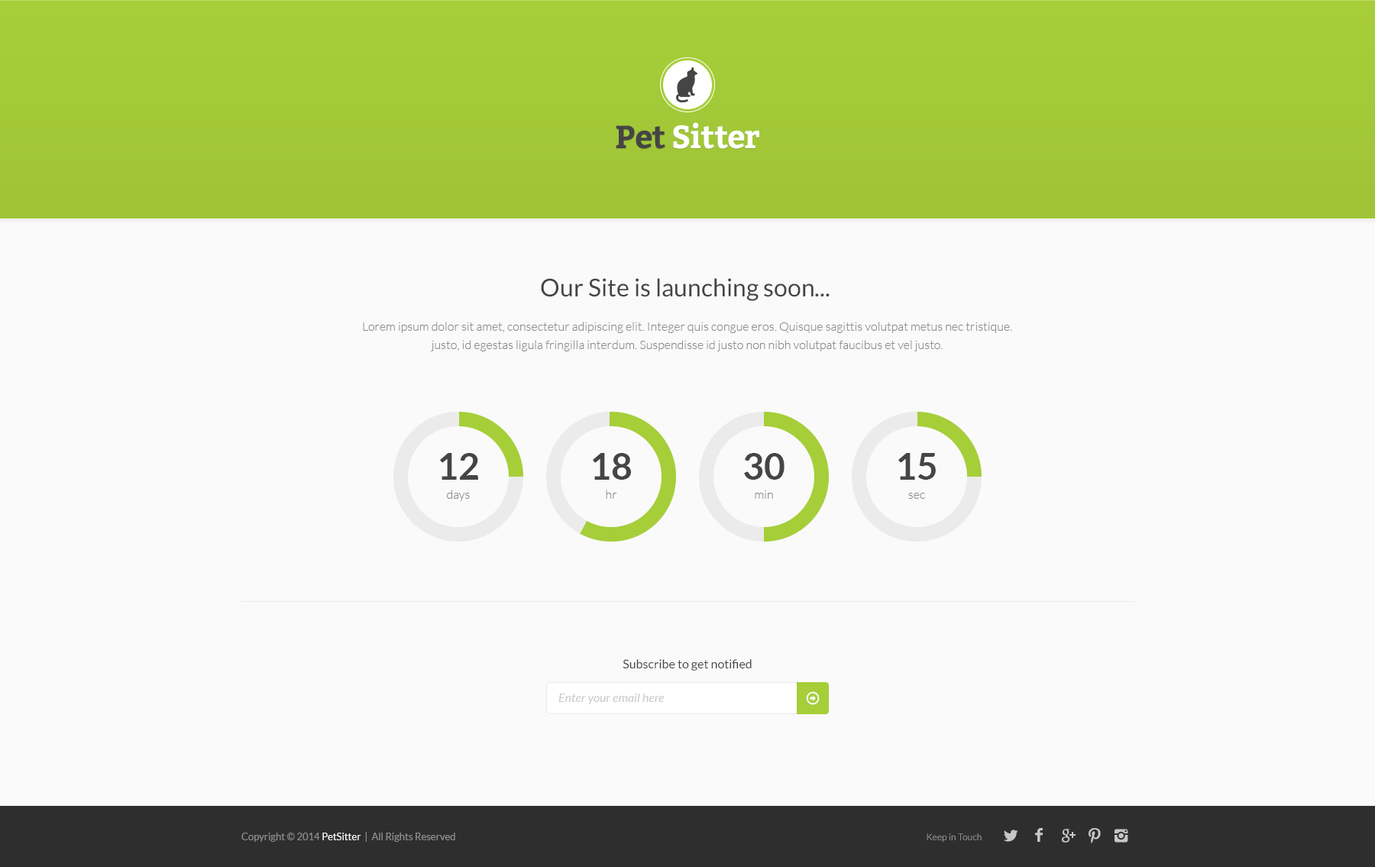
<style>
.page{position:relative;width:1375px;height:867px;background:#fafafa}
.page>*{position:absolute;margin:0}
.t1{font:32.1px "Bitter-Bold";letter-spacing:-0.025em;color:#ffffff}
.t2{font:32.1px "Bitter-Bold";letter-spacing:-0.025em;color:#454545}
.t3{font:24.4px "Lato-Regular";color:#454545}
.t4{font:12.2px/18.3px "Lato-Light";color:#8c8c8c}
.t5{font:36.7px "Lato-Bold";color:#454545}
.t6{font:12.2px "Lato-Light";color:#8c8c8c}
.t7{font:12.2px "Lato-Regular";color:#454545}
.t8{font:12.2px "Lato-Italic";color:#cacaca}
.t9{font:9.9px "Lato-Regular";color:#8c8c8c}
.t10{font:9.9px "Lato-Regular";color:#f4f4f4}
.t11{font:9.2px "Lato-Regular";color:#8c8c8c}
</style>
<div class="page">
<p class="t1" style="left:616px;top:122px;width:144px;height:27px"><span class="t2">Pet </span>Sitter</p>
<p class="t3" style="left:541px;top:278px;width:289px;height:23px">Our Site is launching soon...</p>
<p class="t4" style="left:363px;top:322px;width:649px;height:29px;text-align:center">Lorem ipsum dolor sit amet, consectetur adipiscing elit. Integer quis congue eros. Quisque sagittis volutpat metus nec tristique. <br>justo, id egestas ligula fringilla interdum. Suspendisse id justo non nibh volutpat faucibus et vel justo.</p>
<p class="t5" style="left:440px;top:453px;width:38px;height:27px">12</p>
<p class="t5" style="left:593px;top:453px;width:38px;height:27px">18</p>
<p class="t5" style="left:744px;top:453px;width:41px;height:27px">30</p>
<p class="t5" style="left:898px;top:453px;width:38px;height:27px">15</p>
<p class="t6" style="left:447px;top:490px;width:23px;height:11px">days</p>
<p class="t6" style="left:606px;top:490px;width:11px;height:9px">hr</p>
<p class="t6" style="left:755px;top:490px;width:18px;height:9px">min</p>
<p class="t6" style="left:908px;top:493px;width:17px;height:6px">sec</p>
<p class="t7" style="left:623px;top:659px;width:129px;height:12px">Subscribe to get notified</p>
<p class="t8" style="left:558px;top:694px;width:107px;height:10px">Enter your email here</p>
<p class="t9" style="left:241px;top:832px;width:214px;height:10px">Copyright © 2014 <span class="t10">PetSitter  </span>|  All Rights Reserved</p>
<p class="t11" style="left:927px;top:834px;width:55px;height:8px">Keep in Touch</p>
</div>
